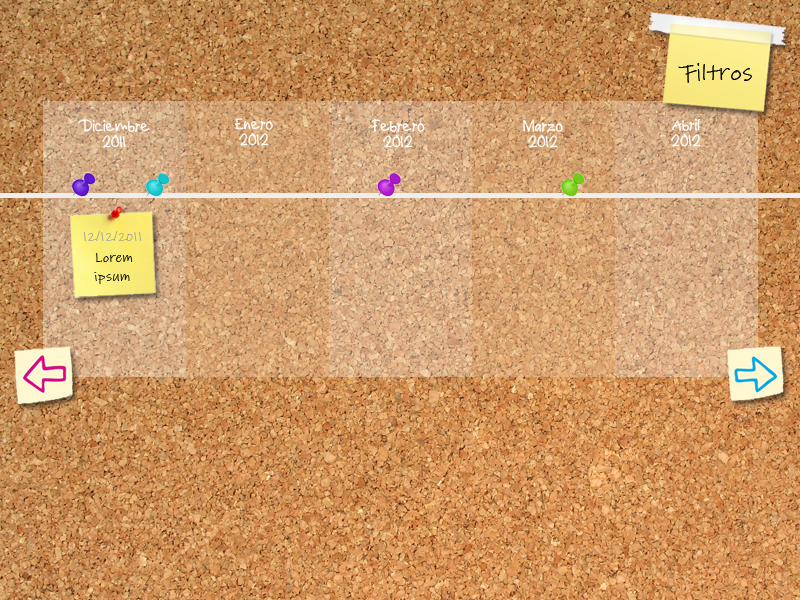
<style>
.page{position:relative;width:800px;height:600px}
.page>*{position:absolute;margin:0}
.t1{font:24px "Lindsey";letter-spacing:0.025em;color:#000000}
.t2{font:18px/16px "!PaulMaul-Bold";letter-spacing:0.025em;color:#ffffff}
.t3{font:11.8px "Lindsey";letter-spacing:0.025em;color:#a0a0a0}
.t4{font:14.2px/18.9px "Lindsey";letter-spacing:0.025em;color:#000000}
</style>
<div class="page">
<p class="t1" style="left:678px;top:63px;width:74px;height:20px">Filtros</p>
<p class="t2" style="left:78px;top:119px;width:72px;height:29px;text-align:center">Diciembre<br>2011</p>
<p class="t2" style="left:234px;top:118px;width:39px;height:28px;text-align:center">Enero<br>2012</p>
<p class="t2" style="left:371px;top:118px;width:54px;height:30px;text-align:center">Febrero<br>2012</p>
<p class="t2" style="left:523px;top:119px;width:40px;height:29px;text-align:center">Marzo<br>2012</p>
<p class="t2" style="left:671px;top:118px;width:30px;height:29px;text-align:center">Abril<br>2012</p>
<p class="t3" style="left:83px;top:231px;width:59px;height:10px">12/12/2011</p>
<p class="t4" style="left:94px;top:253px;width:38px;height:31px">Lorem <br>ipsum</p>
</div>
